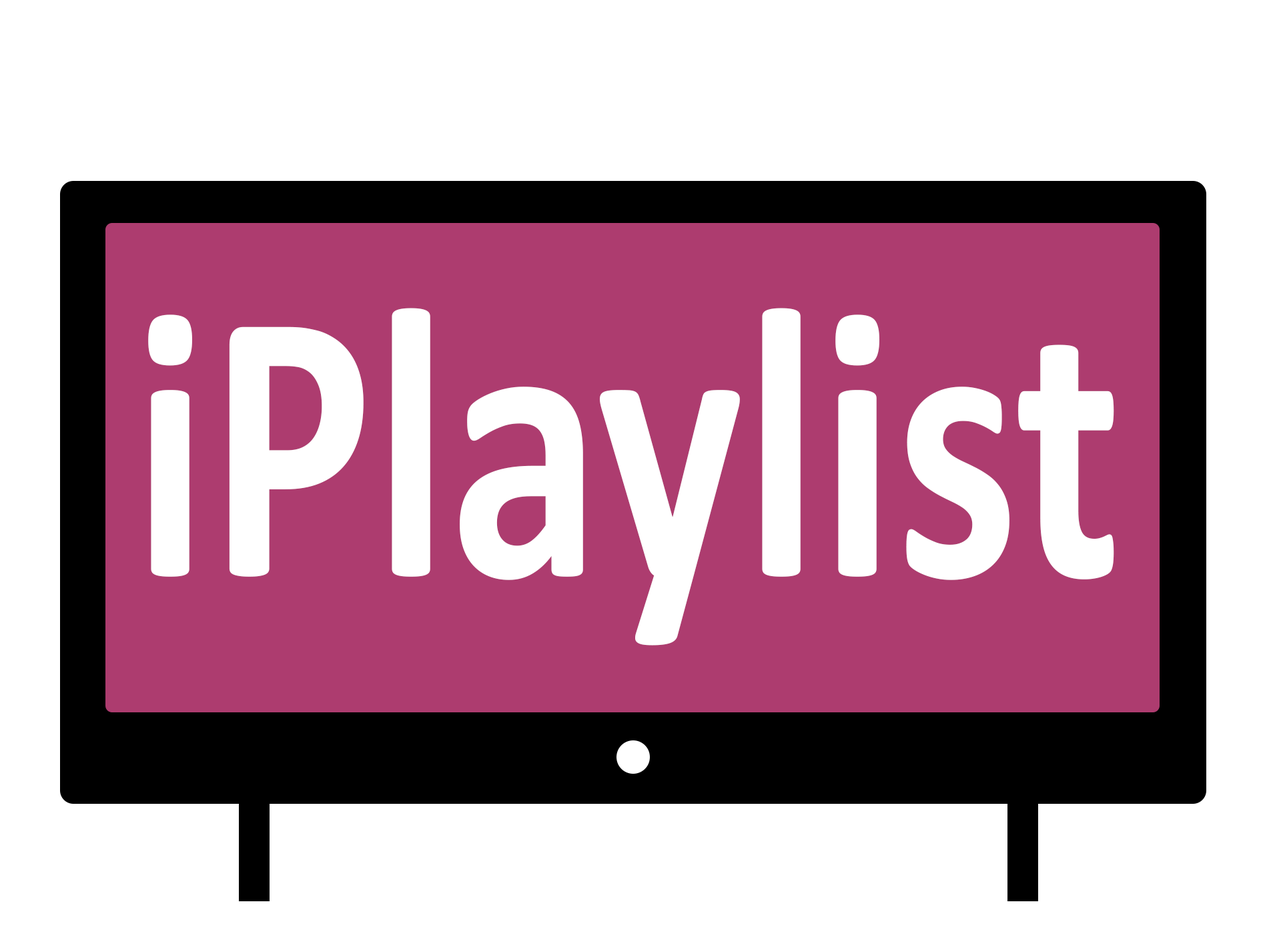
<style>
.page{position:relative;width:1261px;height:946px;background:#ffffff}
.page>*{position:absolute;margin:0}
.t1{font:393.3px "Calibri-Bold";color:#ffffff;scale:0.79 1}
</style>
<div class="page">
<p class="t1" style="left:148px;top:308px;width:966px;height:337px">iPlaylist</p>
</div>
